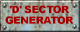
<style>
.page{position:relative;width:80px;height:32px}
.page>*{position:absolute;margin:0}
.t1{font:10.1px/10.7px "Arial-Black";letter-spacing:-0.06em;color:#a40000;scale:1.05 1}
</style>
<div class="page">
<p class="t1" style="left:5px;top:5px;width:69px;height:19px;text-align:center">'D' SECTOR<br>GENERATOR</p>
</div>
